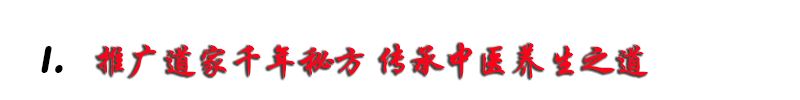
<style>
.page{position:relative;width:800px;height:100px;background:#ffffff}
.page>*{position:absolute;margin:0}
.t1{font:36px "AlbaMatter";letter-spacing:-0.05em;color:#000000;font-style:italic}
.t2{font:36px "STXingkai";letter-spacing:-0.05em;color:#fc031a}
</style>
<div class="page">
<p class="t1" style="left:41px;top:46px;width:22px;height:27px">1 .</p>
<p class="t2" style="left:97px;top:42px;width:551px;height:36px">推广道家千年秘方 传承中医养生之道</p>
</div>
